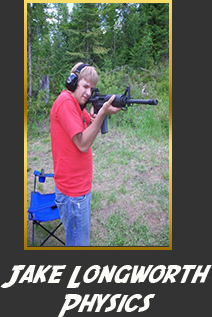
<style>
.page{position:relative;width:212px;height:317px;background:#333333}
.page>*{position:absolute;margin:0}
.t1{font:24.6px "SFFedora";letter-spacing:-0.005em;color:#fcfcf9;scale:1.05 1}
</style>
<div class="page">
<p class="t1" style="left:0px;top:265px;width:212px;height:52px;text-align:center">Jake Longworth<br>Physics</p>
</div>
